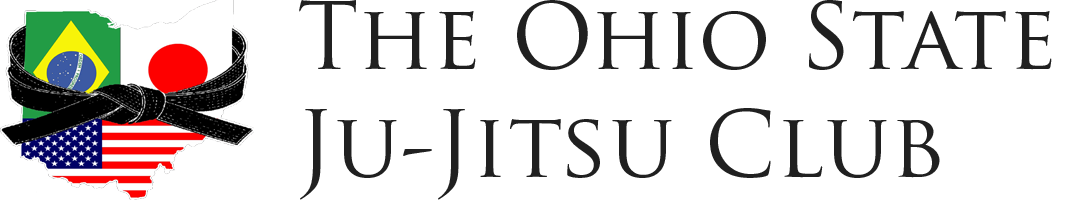
<style>
.page{position:relative;width:1080px;height:200px;background:#ffffff}
.page>*{position:absolute;margin:0}
.t1{font:90px "TrajanPro-Regular";color:#202020}
</style>
<div class="page">
<p class="t1" style="left:299px;top:0px;width:753px;height:200px">The Ohio State <br>Ju-Jitsu Club</p>
</div>
